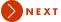
<style>
.page{position:relative;width:61px;height:22px;background:#ffffff}
.page>*{position:absolute;margin:0}
.t1{font:9px "Futura-Bold";letter-spacing:0.26em;color:#ce3502}
</style>
<div class="page">
<p class="t1" style="left:26px;top:8px;width:32px;height:7px">NEXT</p>
</div>
